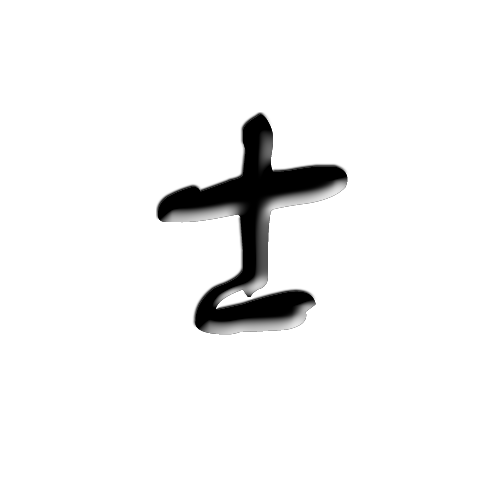
<style>
.page{position:relative;width:500px;height:500px;background:#ffffff}
.page>*{position:absolute;margin:0}
.t1{font:320px "FZSTK--GBK1-0";color:#000000}
</style>
<div class="page">
<p class="t1" style="left:158px;top:114px;width:190px;height:221px">士</p>
</div>
